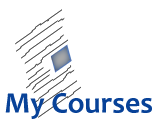
<style>
.page{position:relative;width:160px;height:130px;background:#ffffff}
.page>*{position:absolute;margin:0}
.t1{font:30px "Candara-Bold";color:#084298}
</style>
<div class="page">
<p class="t1" style="left:5px;top:93px;width:147px;height:26px">My Courses</p>
</div>
